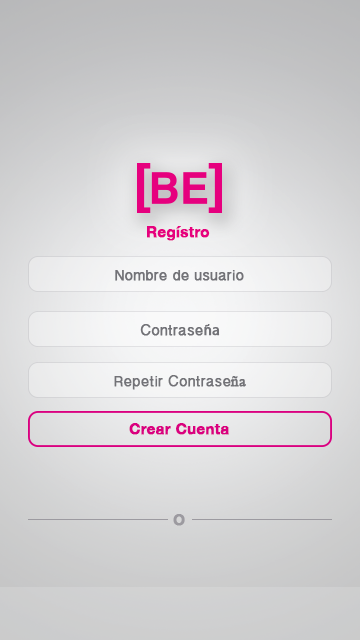
<style>
.page{position:relative;width:360px;height:640px}
.page>*{position:absolute;margin:0}
.t1{font:15px "HelveticaNeue-Bold";color:#e6007e;font-weight:bold}
.t2{font:15px "MyanmarSangamMN";color:#727277;font-weight:bold}
.t3{font:15px "MyriadPro-Regular";color:#727277;font-weight:bold}
.t4{font:15px "TimesNewRomanPSMT";color:#727277;font-weight:bold}
.t5{font:15px "HelveticaNeue-Bold";color:#da0080;font-weight:bold}
.t6{font:15px "HelveticaNeue-Bold";color:#9c9aa0;font-weight:bold}
</style>
<div class="page">
<p class="t1" style="left:147px;top:226px;width:63px;height:15px">Regístro</p>
<p class="t2" style="left:115px;top:270px;width:129px;height:11px">Nombre de usuario</p>
<p class="t2" style="left:140px;top:324px;width:80px;height:12px">Contrase<span class="t3">ña</span></p>
<p class="t2" style="left:114px;top:375px;width:132px;height:15px">Repetir Contrase<span class="t4">ña</span></p>
<p class="t5" style="left:129px;top:423px;width:100px;height:12px">Crear Cuenta</p>
<p class="t6" style="left:173px;top:514px;width:12px;height:12px">O</p>
</div>
